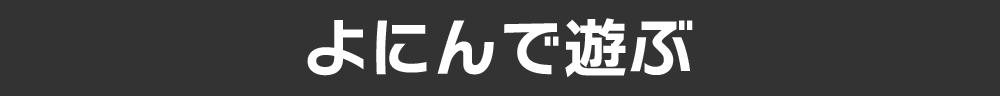
<style>
.page{position:relative;width:1000px;height:96px;background:#333333}
.page>*{position:absolute;margin:0}
.t1{font:65px "NitalagoRuika-06";color:#ffffff}
</style>
<div class="page">
<p class="t1" style="left:307px;top:18px;width:386px;height:60px">よにんで遊ぶ</p>
</div>
